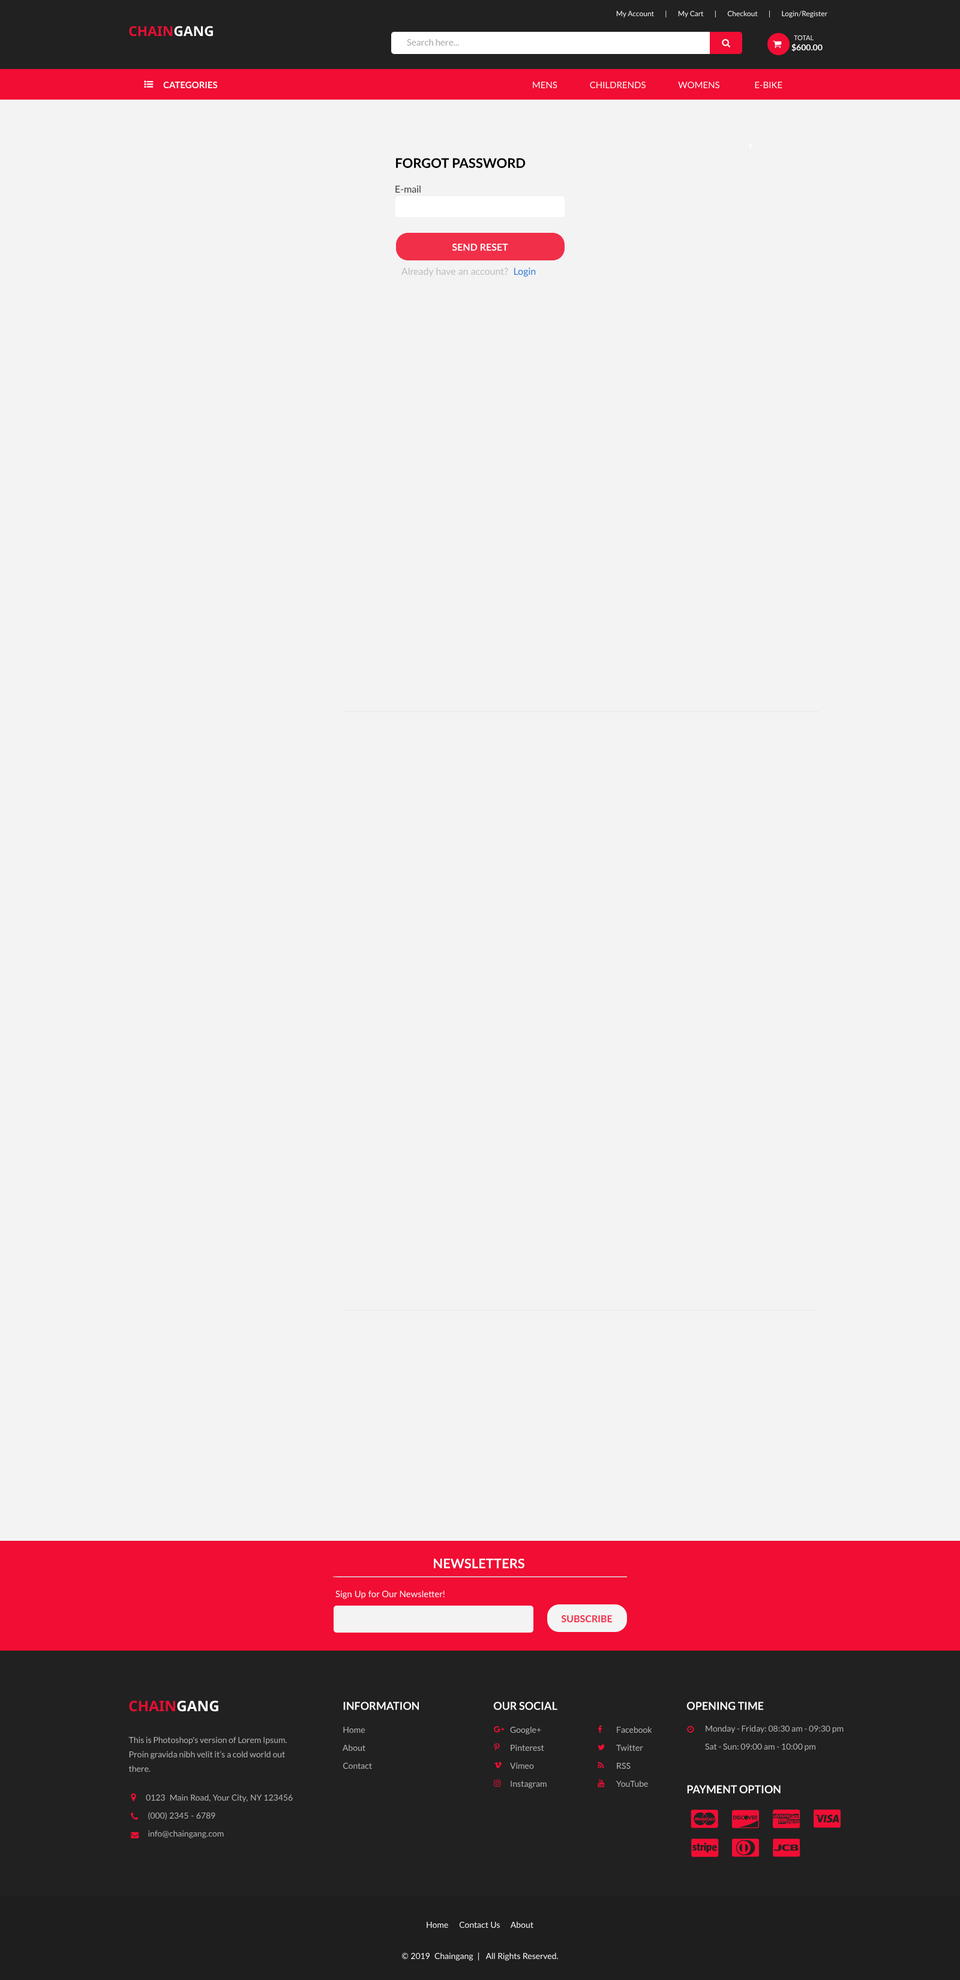
<style>
.page{position:relative;width:960px;height:1980px;background:#f3f3f3}
.page>*{position:absolute;margin:0}
.t1{font:7.2px "Lato-Regular";color:#ffffff}
.t2{font:13.7px "NotoSans-Bold";color:#e40f33}
.t3{font:13.7px "NotoSans-Bold";color:#ffffff}
.t4{font:9px "Lato-Regular";color:#a7a7a7}
.t5{font:6.6px "Lato-Regular";color:#ffffff;text-transform:uppercase}
.t6{font:8.4px "Lato-Bold";color:#ffffff}
.t7{font:9px "Lato-Bold";color:#ffffff;text-transform:uppercase}
.t8{font:9px "Lato-Regular";color:#ffffff;text-transform:uppercase}
.t9{font:13.2px "Lato-Bold";color:#000000;text-transform:uppercase}
.t10{font:9.6px "Lato-Regular";color:#3d3d3d}
.t11{font:9.6px "Lato-Bold";color:#ffffff;text-transform:uppercase}
.t12{font:9.6px "Lato-Regular";color:#bcbcbc}
.t13{font:9.6px "Lato-Regular";color:#377ad7}
.t14{font:13.2px "Lato-Bold";color:#ffffff;text-transform:uppercase}
.t15{font:9px "Lato-Regular";color:#ffffff}
.t16{font:9.6px "Lato-Bold";color:#f12f49;text-transform:uppercase}
.t17{font:14.6px "NotoSans-Bold";color:#e40f33}
.t18{font:14.6px "NotoSans-Bold";color:#ffffff}
.t19{font:10.8px "Lato-Bold";color:#ffffff;text-transform:uppercase}
.t20{font:8.4px/18px "Lato-Regular";color:#b6b6b6}
.t21{font:8.4px/14.4px "Lato-Regular";color:#b6b6b6}
.t22{font:8.4px "Lato-Regular";color:#ffffff}
</style>
<div class="page">
<p class="t1" style="left:616px;top:10px;width:211px;height:8px">My Account      |      My Cart      |      Checkout      |      Login/Register</p>
<p class="t2" style="left:129px;top:26px;width:84px;height:11px">CHAIN<span class="t3">GANG</span></p>
<p class="t4" style="left:407px;top:39px;width:52px;height:7px">Search here...</p>
<p class="t5" style="left:794px;top:35px;width:20px;height:5px">Total</p>
<p class="t6" style="left:791px;top:43px;width:32px;height:9px">$600.00</p>
<p class="t7" style="left:163px;top:81px;width:55px;height:8px">Categories</p>
<p class="t8" style="left:533px;top:82px;width:249px;height:7px">MENS              CHILDRENDS              WOMENS               E-BIKE</p>
<p class="t9" style="left:396px;top:158px;width:130px;height:10px">Forgot password</p>
<p class="t10" style="left:395px;top:185px;width:26px;height:8px">E-mail</p>
<p class="t11" style="left:452px;top:244px;width:56px;height:7px">Send reset</p>
<p class="t12" style="left:401px;top:268px;width:135px;height:9px">Already have an account?  <span class="t13">Login</span></p>
<p class="t14" style="left:434px;top:1558px;width:91px;height:10px">Newsletters</p>
<p class="t15" style="left:335px;top:1590px;width:110px;height:9px">Sign Up for Our Newsletter!</p>
<p class="t16" style="left:561px;top:1615px;width:52px;height:7px">sUBSCRIBE</p>
<p class="t17" style="left:129px;top:1700px;width:89px;height:12px">CHAIN<span class="t18">GANG</span></p>
<p class="t19" style="left:343px;top:1702px;width:76px;height:8px">Information</p>
<p class="t19" style="left:493px;top:1702px;width:64px;height:8px">Our Social</p>
<p class="t19" style="left:686px;top:1702px;width:78px;height:8px">Opening Time</p>
<p class="t20" style="left:342px;top:1726px;width:30px;height:43px">Home<br>    About<br>    Contact</p>
<p class="t20" style="left:510px;top:1726px;width:37px;height:63px">Google+<br>Pinterest<br>Vimeo<br>Instagram</p>
<p class="t20" style="left:616px;top:1726px;width:36px;height:61px">Facebook<br>Twitter<br>RSS<br>YouTube</p>
<p class="t20" style="left:705px;top:1725px;width:139px;height:26px">Monday - Friday: 08:30 am - 09:30 pm<br>Sat - Sun: 09:00 am - 10:00 pm</p>
<p class="t21" style="left:128px;top:1736px;width:159px;height:36px">This is Photoshop's version of Lorem Ipsum. Proin gravida nibh velit it’s a cold world out there.</p>
<p class="t19" style="left:687px;top:1785px;width:94px;height:8px">Payment Option</p>
<p class="t20" style="left:146px;top:1794px;width:147px;height:44px">0123  Main Road, Your City, NY 123456<br> (000) 2345 - 6789<br> info@chaingang.com</p>
<p class="t22" style="left:427px;top:1921px;width:106px;height:7px">Home     Contact Us     About</p>
<p class="t22" style="left:401px;top:1952px;width:158px;height:9px">© 2019  Chaingang  |   All Rights Reserved.</p>
</div>
